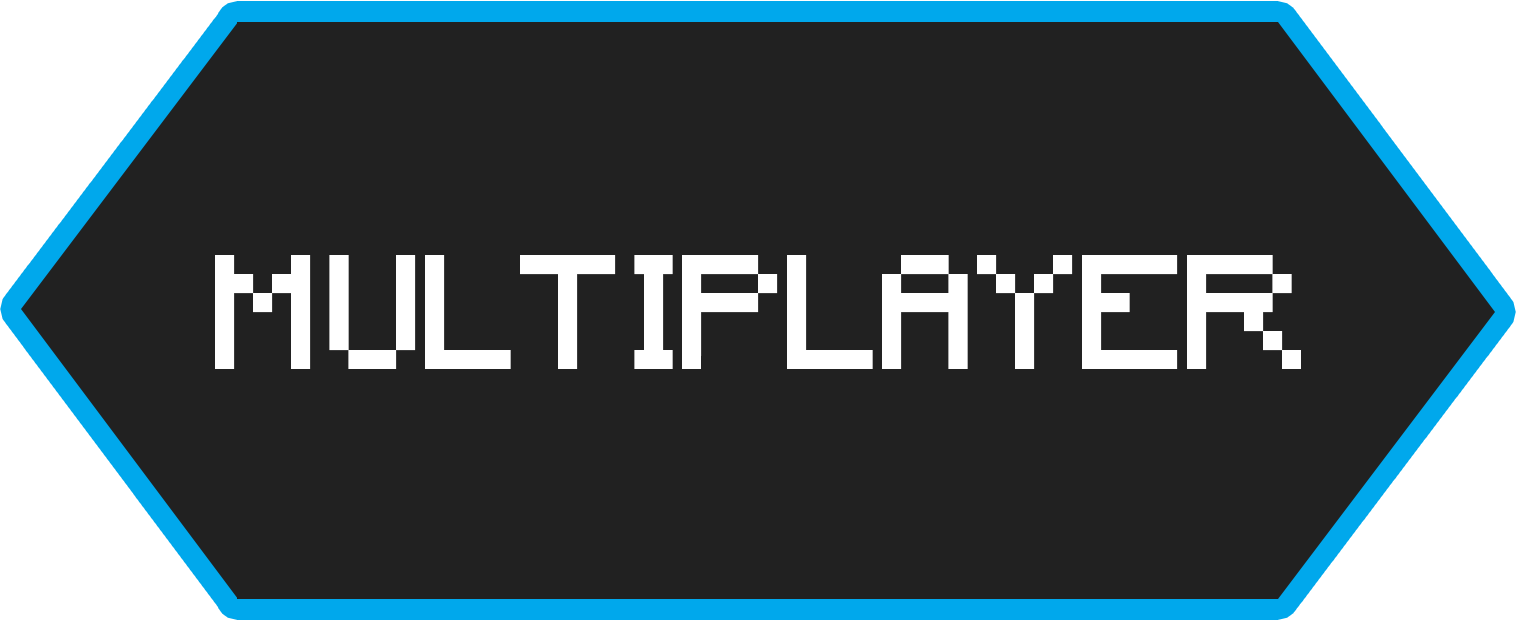
<style>
.page{position:relative;width:1516px;height:621px;background:#212121}
.page>*{position:absolute;margin:0}
.t1{font:152.3px "Minecraft";color:#ffffff}
</style>
<div class="page">
<p class="t1" style="left:215px;top:255px;width:1086px;height:114px">MULTIPLAYER</p>
</div>
